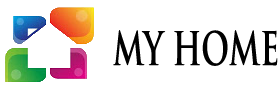
<style>
.page{position:relative;width:280px;height:90px;background:#ffffff}
.page>*{position:absolute;margin:0}
.t1{font:45px "TrajanPro-Bold";color:#000000;scale:0.67 1}
</style>
<div class="page">
<p class="t1" style="left:113px;top:30px;width:165px;height:36px">MY HOME</p>
</div>
